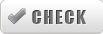
<style>
.page{position:relative;width:103px;height:34px}
.page>*{position:absolute;margin:0}
.t1{font:18px "Impact";letter-spacing:0.1em;color:#727272}
</style>
<div class="page">
<p class="t1" style="left:32px;top:10px;width:54px;height:14px">CHECK</p>
</div>
